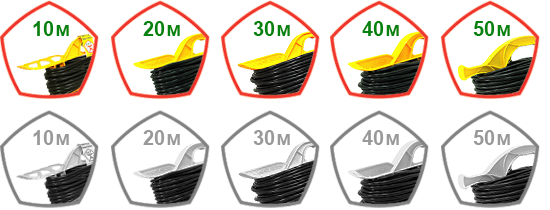
<style>
.page{position:relative;width:550px;height:210px;background:#fefffe}
.page>*{position:absolute;margin:0}
.t1{font:20px "Arial-BoldMT";letter-spacing:0.05em;color:#038212}
.t2{font:20px "Arial-BoldMT";color:#038212}
.t3{font:20px "Arial-BoldMT";letter-spacing:0.05em;color:#999999}
.t4{font:20px "Arial-BoldMT";color:#999999}
</style>
<div class="page">
<p class="t1" style="left:33px;top:21px;width:36px;height:15px"><span class="t2">1</span>0м</p>
<p class="t1" style="left:143px;top:21px;width:37px;height:15px"><span class="t2">2</span>0м</p>
<p class="t1" style="left:253px;top:21px;width:37px;height:15px"><span class="t2">3</span>0м</p>
<p class="t1" style="left:362px;top:21px;width:37px;height:15px"><span class="t2">4</span>0м</p>
<p class="t1" style="left:473px;top:21px;width:37px;height:15px"><span class="t2">5</span>0м</p>
<p class="t3" style="left:33px;top:130px;width:36px;height:15px"><span class="t4">1</span>0м</p>
<p class="t3" style="left:143px;top:130px;width:37px;height:15px"><span class="t4">2</span>0м</p>
<p class="t3" style="left:253px;top:130px;width:37px;height:15px"><span class="t4">3</span>0м</p>
<p class="t3" style="left:362px;top:130px;width:37px;height:15px"><span class="t4">4</span>0м</p>
<p class="t3" style="left:473px;top:130px;width:37px;height:15px"><span class="t4">5</span>0м</p>
</div>
